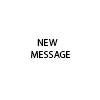
<style>
.page{position:relative;width:100px;height:100px;background:#ffffff}
.page>*{position:absolute;margin:0}
.t1{font:10px "MyriadPro-Regular";color:#000000}
</style>
<div class="page">
<p class="t1" style="left:31px;top:39px;width:39px;height:19px">NEW <br>MESSAGE</p>
</div>
